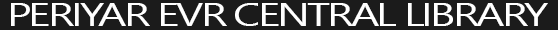
<style>
.page{position:relative;width:558px;height:30px;background:#1b1b1b}
.page>*{position:absolute;margin:0}
.t1{font:32.2px "NirmalaUI";letter-spacing:-0.065em;color:#ffffff;scale:1.37 1}
</style>
<div class="page">
<p class="t1" style="left:11px;top:3px;width:537px;height:23px">PERIYAR EVR CENTRAL LIBRARY</p>
</div>
